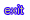
<style>
.page{position:relative;width:30px;height:20px;background:#ffffff}
.page>*{position:absolute;margin:0}
.t1{font:12px "Gulim";color:#bfbf8e}
</style>
<div class="page">
<p class="t1" style="left:4px;top:5px;width:20px;height:9px">exit</p>
</div>
